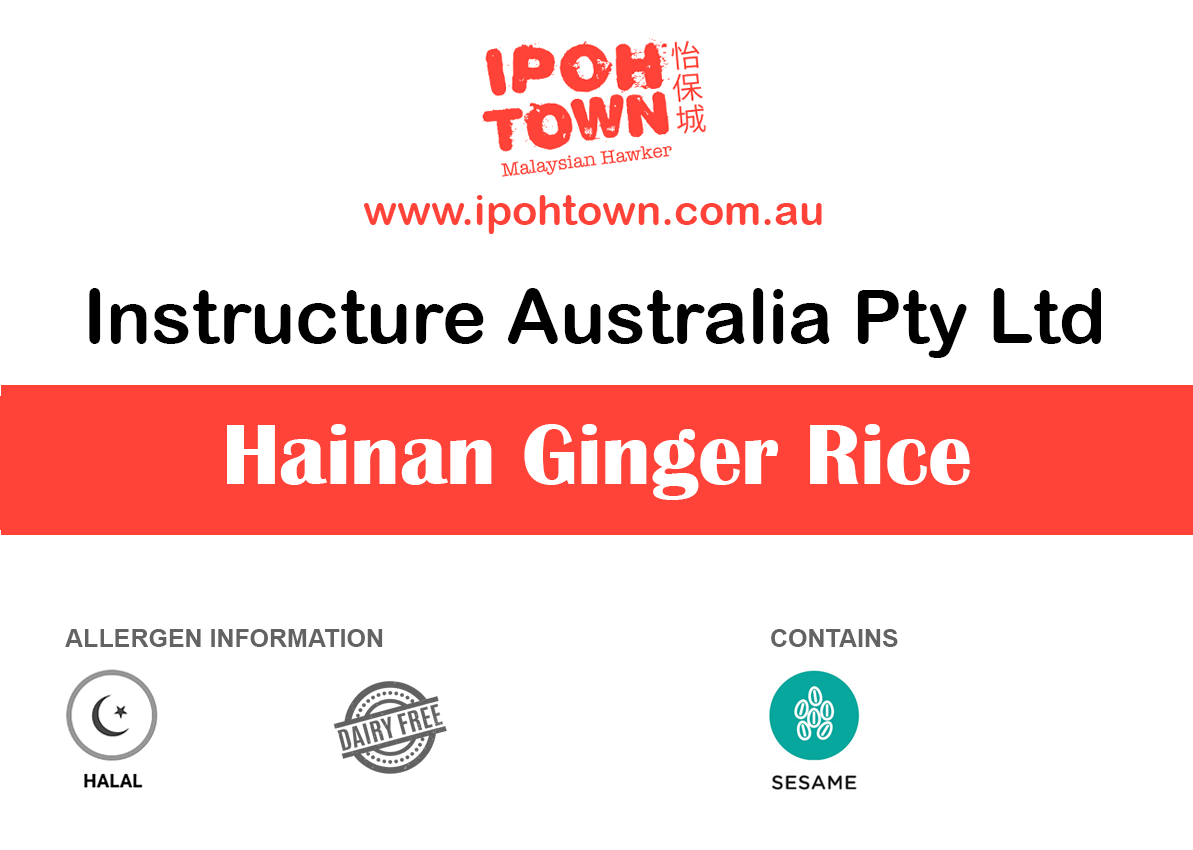
<style>
.page{position:relative;width:1193px;height:850px;background:#ffffff}
.page>*{position:absolute;margin:0}
.t1{font:41.7px "ArialRoundedMTBold";color:#ff4338}
.t2{font:75px "ArialRoundedMTBold";color:#000000}
.t3{font:87.5px "BritannicBold";color:#ffffff}
.t4{font:25px "Arial-BoldMT";color:#636363}
</style>
<div class="page">
<p class="t1" style="left:364px;top:195px;width:458px;height:39px">www.ipohtown.com.au</p>
<p class="t2" style="left:89px;top:288px;width:1012px;height:70px">Instructure Australia Pty Ltd</p>
<p class="t3" style="left:227px;top:424px;width:743px;height:76px">Hainan Ginger Rice</p>
<p class="t4" style="left:65px;top:629px;width:318px;height:18px">ALLERGEN INFORMATION</p>
<p class="t4" style="left:771px;top:629px;width:127px;height:18px">CONTAINS</p>
</div>
